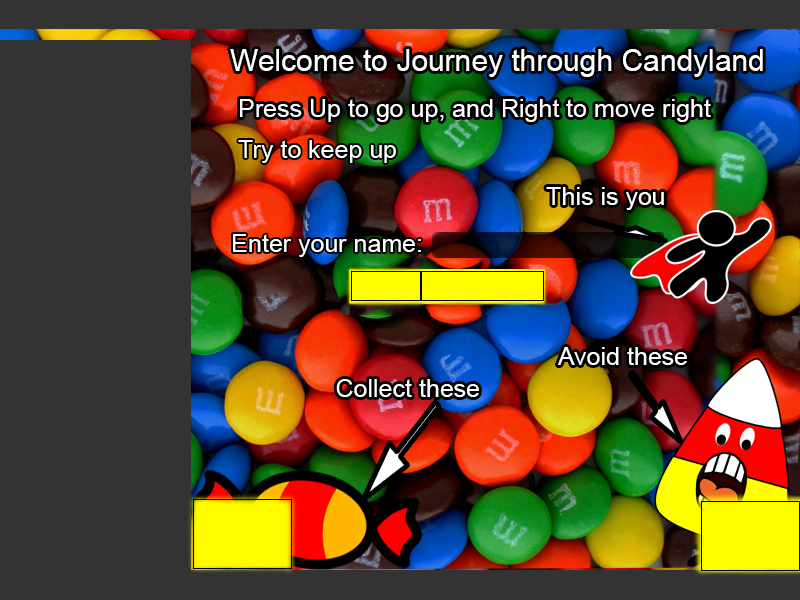
<style>
.page{position:relative;width:800px;height:600px;background:#333333}
.page>*{position:absolute;margin:0}
.t1{font:30px "ArialMT";color:#ffffff}
.t2{font:25px "ArialMT";color:#ffffff}
</style>
<div class="page">
<p class="t1" style="left:230px;top:49px;width:533px;height:28px">Welcome to Journey through Candyland</p>
<p class="t2" style="left:240px;top:99px;width:471px;height:23px">Press Up to go up, and Right to move right</p>
<p class="t2" style="left:238px;top:140px;width:158px;height:23px">Try to keep up</p>
<p class="t2" style="left:546px;top:187px;width:118px;height:23px">This is you</p>
<p class="t2" style="left:233px;top:234px;width:188px;height:23px">Enter your name:</p>
<p class="t2" style="left:558px;top:347px;width:129px;height:18px">Avoid these</p>
<p class="t2" style="left:336px;top:379px;width:143px;height:18px">Collect these</p>
</div>
